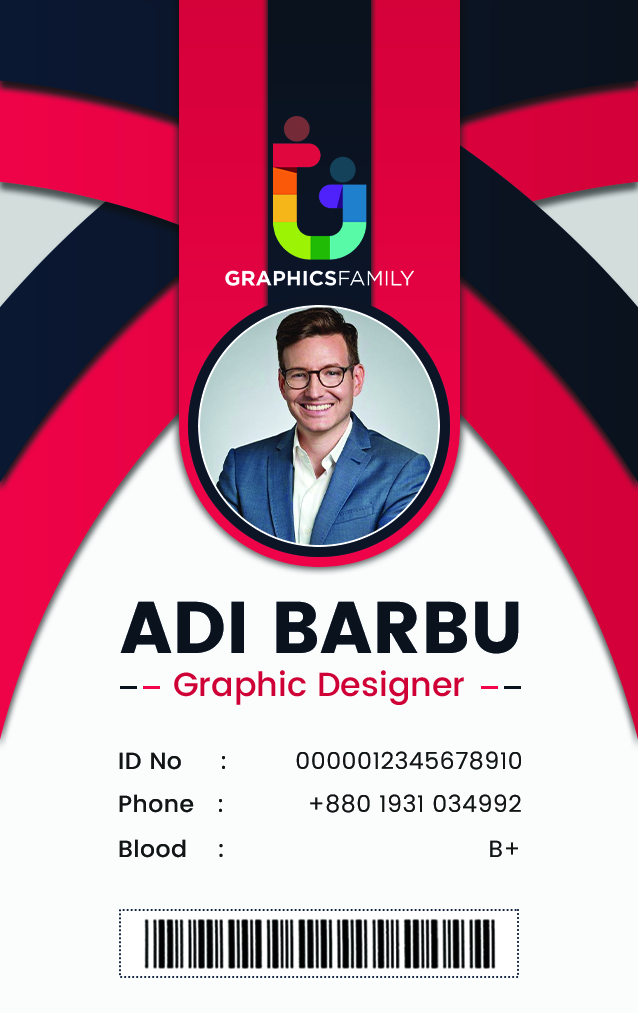
<style>
.page{position:relative;width:638px;height:1013px;background:#fbfdfd}
.page>*{position:absolute;margin:0}
.t1{font:72.9px "Poppins-Bold";color:#0a121e;text-transform:uppercase}
.t2{font:33.3px "Poppins-Medium";color:#cf0036}
.t3{font:23.4px "Poppins-Regular";letter-spacing:0.02em;color:#111515}
.t4{font:23.4px "Poppins-Medium";letter-spacing:0.02em;color:#111515}
</style>
<div class="page">
<p class="t1" style="left:120px;top:601px;width:399px;height:53px">Adi barbu</p>
<p class="t2" style="left:174px;top:670px;width:290px;height:35px">Graphic Designer</p>
<p class="t3" style="left:119px;top:751px;width:402px;height:19px"><span class="t4">ID No     :         </span>0000012345678910</p>
<p class="t3" style="left:119px;top:794px;width:402px;height:19px"><span class="t4">Phone   :           </span>+880 1931 034992</p>
<p class="t4" style="left:119px;top:839px;width:399px;height:19px">Blood    :                                   <span class="t3">B+</span></p>
</div>
